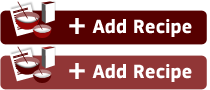
<style>
.page{position:relative;width:210px;height:90px;background:#ffffff}
.page>*{position:absolute;margin:0}
.t1{font:30px "MyriadPro-Black";color:#ffffff}
.t2{font:20px "PFSquareSansPro-Bold";color:#ffffff}
</style>
<div class="page">
<p class="t1" style="left:69px;top:18px;width:16px;height:16px">+</p>
<p class="t2" style="left:92px;top:19px;width:100px;height:18px">Add Recipe</p>
<p class="t1" style="left:69px;top:63px;width:16px;height:16px">+</p>
<p class="t2" style="left:92px;top:64px;width:100px;height:18px">Add Recipe</p>
</div>
